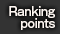
<style>
.page{position:relative;width:60px;height:34px;background:#333333}
.page>*{position:absolute;margin:0}
.t1{font:12px/12px "GothicMB101Pro-Medium";letter-spacing:-0.04em;color:#fef7f2;scale:0.9 1}
</style>
<div class="page">
<p class="t1" style="left:9px;top:6px;width:46px;height:24px;text-align:right">Ranking<br>points</p>
</div>
